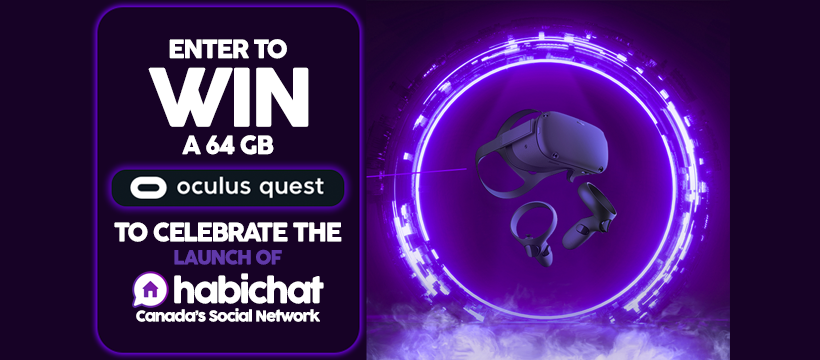
<style>
.page{position:relative;width:820px;height:360px;background:#170226}
.page>*{position:absolute;margin:0}
.t1{font:25px "COCOGOOSE";letter-spacing:-0.075em;color:#ffffff}
.t2{font:79.2px "COCOGOOSE";letter-spacing:-0.075em;color:#ffffff}
.t3{font:25px/300px "COCOGOOSE";letter-spacing:-0.075em;color:#ffffff}
.t4{font:19.2px "COCOGOOSE";letter-spacing:-0.075em;color:#6039a9}
.t5{font:33.3px "COCOGOOSE";letter-spacing:-0.075em;color:#ffffff}
.t6{font:14.6px "COCOGOOSE";letter-spacing:-0.075em;color:#ffffff}
</style>
<div class="page">
<p class="t1" style="left:169px;top:39px;width:118px;height:20px">ENTER TO</p>
<p class="t2" style="left:148px;top:67px;width:161px;height:60px">WIN</p>
<p class="t1" style="left:182px;top:135px;width:92px;height:20px">A 64 GB</p>
<p class="t3" style="left:114px;top:222px;width:228px;height:43px;text-align:center">TO CELEBRATE THE<br><span class="t4">LAUNCH OF</span></p>
<p class="t5" style="left:174px;top:273px;width:150px;height:31px">habichat</p>
<p class="t6" style="left:136px;top:308px;width:184px;height:14px">Canada’s Social Network</p>
</div>
